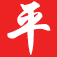
<style>
.page{position:relative;width:57px;height:57px;background:#ec2223}
.page>*{position:absolute;margin:0}
.t1{font:55px "FZXKFW--GB1-0";color:#ffffff;font-weight:bold}
</style>
<div class="page">
<p class="t1" style="left:7px;top:1px;width:44px;height:54px">平</p>
</div>
